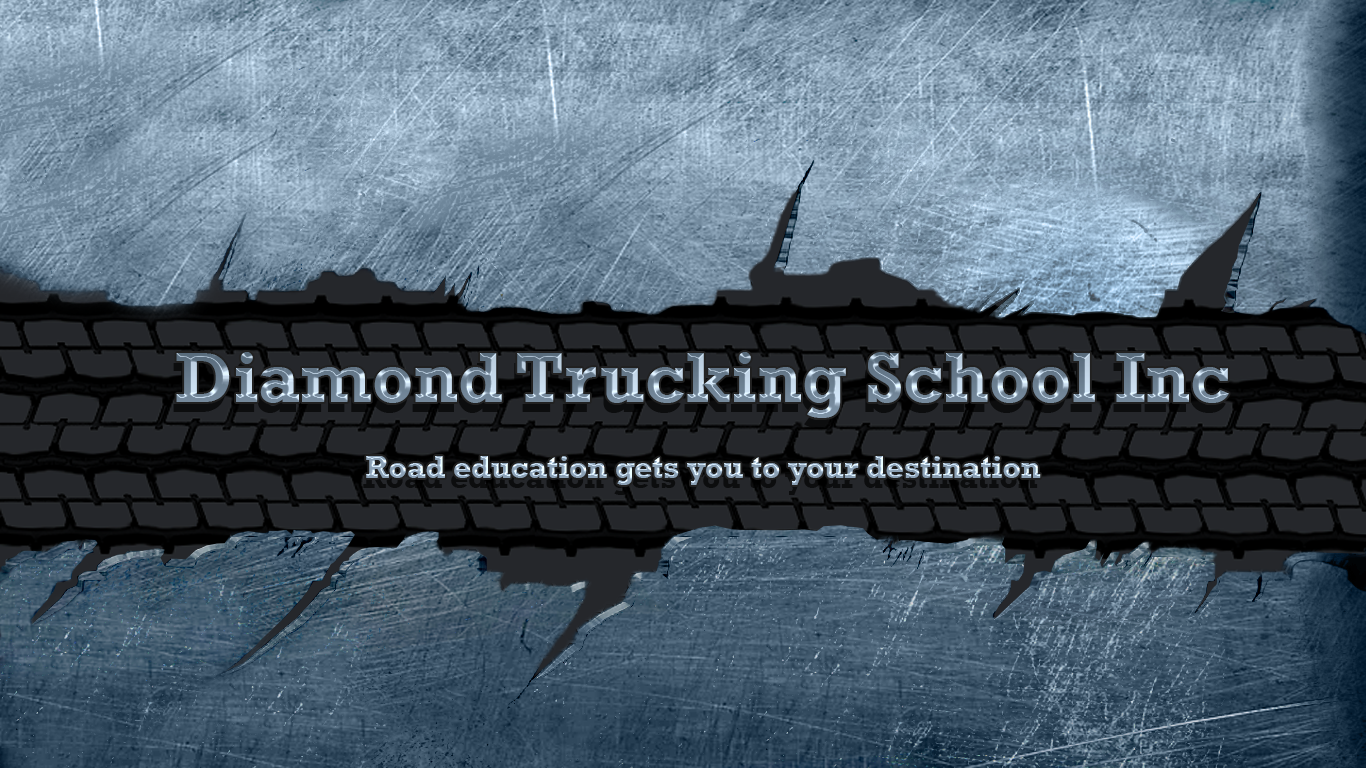
<style>
.page{position:relative;width:1366px;height:768px}
.page>*{position:absolute;margin:0}
.t1{font:31.6px "Rockwell-Bold"}
.t2{font:60px "Rockwell-Bold"}
.t3{font:72px "Rockwell-Bold"}
</style>
<div class="page">
<p class="t1" style="left:176px;top:352px;width:1053px;height:133px"><span class="t2"><br></span><span class="t3">Diamond Trucking School Inc<br></span><br>Road education gets you to your destination</p>
</div>
